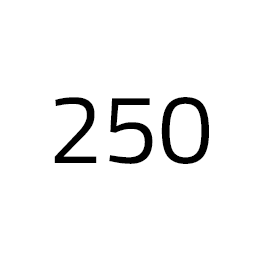
<style>
.page{position:relative;width:256px;height:256px;background:#ffffff}
.page>*{position:absolute;margin:0}
.t1{font:98.3px "TitilliumWeb-Regular";color:#000000}
</style>
<div class="page">
<p class="t1" style="left:54px;top:97px;width:155px;height:67px">250</p>
</div>
